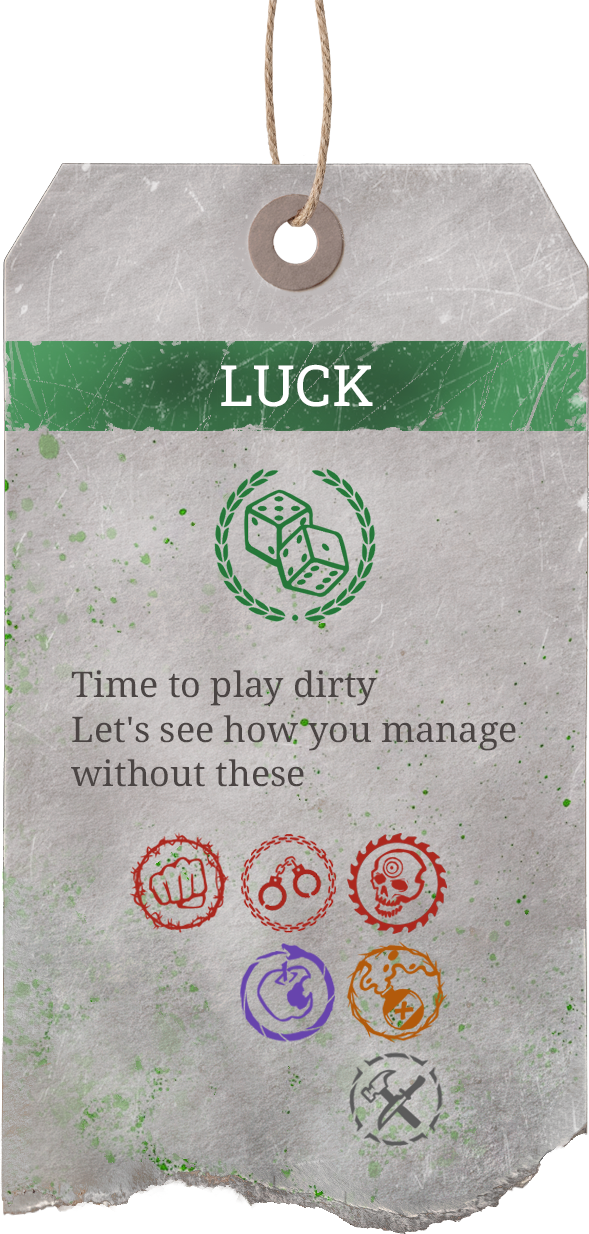
<style>
.page{position:relative;width:589px;height:1234px}
.page>*{position:absolute;margin:0}
.t1{font:57.1px "RobotoSlab-ExtraBold";color:#ffffff}
.t2{font:35.3px/44.6px "NotoSerif-Medium";color:#4b4544}
</style>
<div class="page">
<p class="t1" style="left:221px;top:364px;width:152px;height:43px">LUCK</p>
<p class="t2" style="left:71px;top:670px;width:445px;height:117px">Time to play dirty<br>Let's see how you manage without these</p>
</div>
